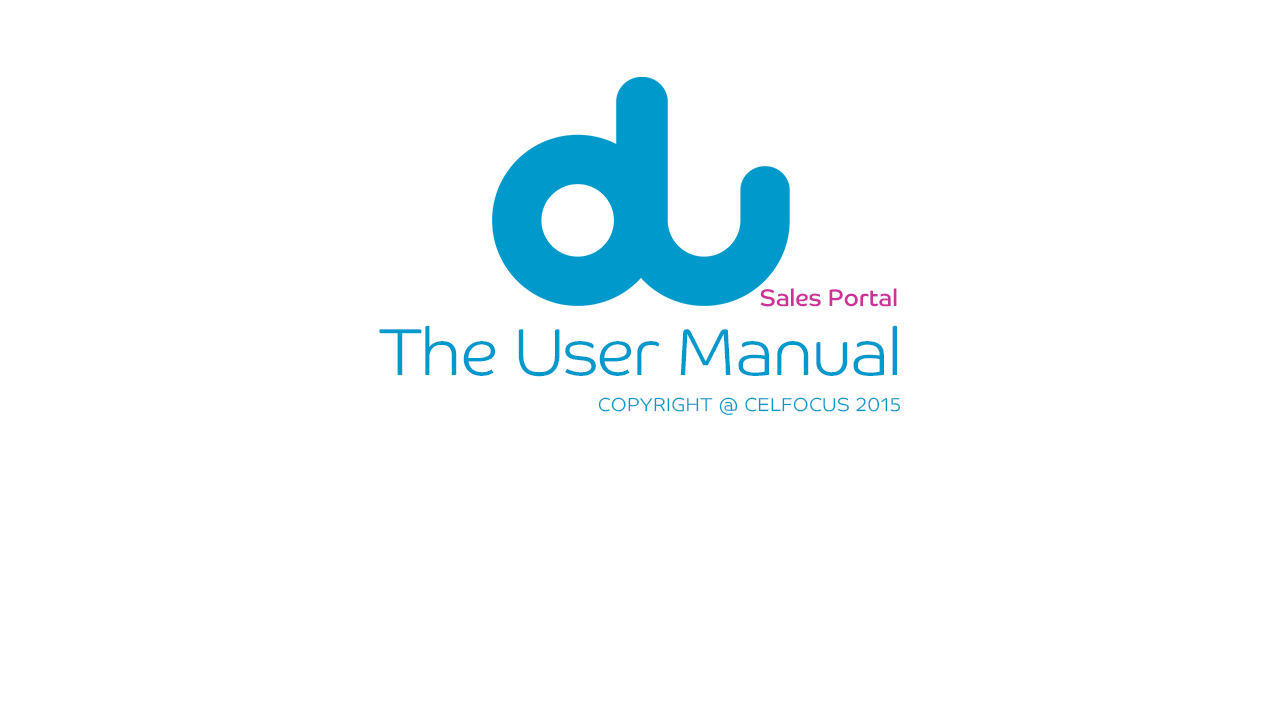
<style>
.page{position:relative;width:1280px;height:720px;background:#ffffff}
.page>*{position:absolute;margin:0}
.t1{font:24px "CoHeadline-Regular";color:#cc3399}
.t2{font:66.7px "CoHeadline-Light";color:#0099cc}
</style>
<div class="page">
<p class="t1" style="left:760px;top:288px;width:137px;height:19px">Sales Portal</p>
<p class="t2" style="left:379px;top:325px;width:518px;height:52px">The User Manual</p>
</div>
